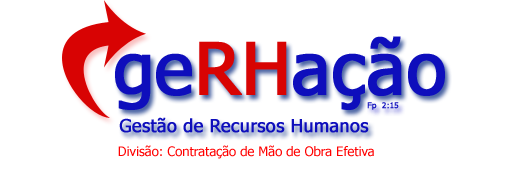
<style>
.page{position:relative;width:505px;height:177px;background:#ffffff}
.page>*{position:absolute;margin:0}
.t1{font:72px "Tahoma";color:#0e0ebc;font-weight:bold}
.t2{font:72px "Tahoma";color:#d80303;font-weight:bold}
.t3{font:8px "Tahoma";color:#0e0ebc;font-weight:bold}
.t4{font:18px "Tahoma";color:#0e0ebc;font-weight:bold}
.t5{font:13px "Tahoma";color:#ff0000}
</style>
<div class="page">
<p class="t1" style="left:115px;top:36px;width:330px;height:74px">ge<span class="t2">RH</span>ação</p>
<p class="t3" style="left:367px;top:102px;width:32px;height:8px">Fp  2:15</p>
<p class="t4" style="left:119px;top:117px;width:250px;height:16px">Gestão de Recursos Humanos</p>
<p class="t5" style="left:118px;top:145px;width:256px;height:14px">Divisão: Contratação de Mão de Obra Efetiva</p>
</div>
